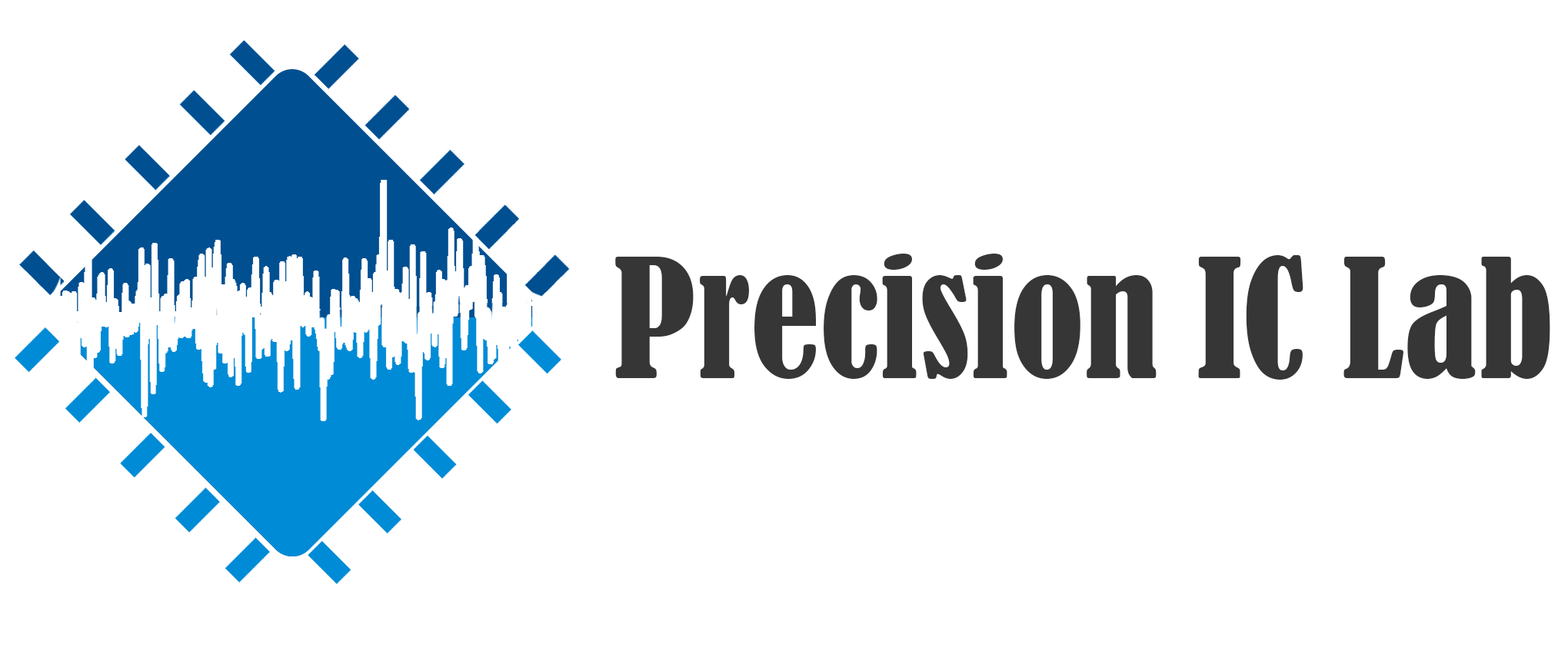
<style>
.page{position:relative;width:1568px;height:654px;background:#ffffff}
.page>*{position:absolute;margin:0}
.t1{font:153.8px "BernardMT-Condensed";color:#363637}
</style>
<div class="page">
<p class="t1" style="left:615px;top:254px;width:935px;height:126px">Precision IC Lab</p>
</div>
